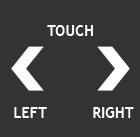
<style>
.page{position:relative;width:140px;height:137px;background:#333333}
.page>*{position:absolute;margin:0}
.t1{font:14.8px "TrebuchetMS-Bold";color:#ffffff}
</style>
<div class="page">
<p class="t1" style="left:47px;top:25px;width:46px;height:11px">TOUCH</p>
<p class="t1" style="left:14px;top:107px;width:33px;height:11px">LEFT</p>
<p class="t1" style="left:93px;top:107px;width:41px;height:11px">RIGHT</p>
</div>
